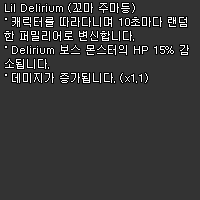
<style>
.page{position:relative;width:200px;height:200px;background:#333333}
.page>*{position:absolute;margin:0}
.t1{font:11px/14px "Dotum";color:#ffffff}
</style>
<div class="page">
<p class="t1" style="left:4px;top:3px;width:185px;height:80px">Lil Delirium (꼬마 주마등)<br>˚ 캐릭터를 따라다니며 10초마다 랜덤<br>한 퍼밀리어로 변신합니다.<br>˚ Delirium 보스 몬스터의 HP 15% 감<br>소됩니다.<br>˚ 데미지가 증가됩니다. (x1.1)</p>
</div>
